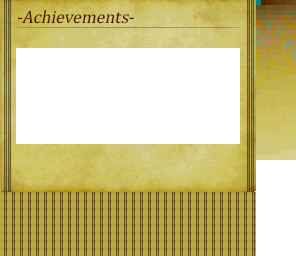
<style>
.page{position:relative;width:296px;height:256px;background:#ffffff}
.page>*{position:absolute;margin:0}
.t1{font:18px "Cambria";color:#502000;font-style:italic}
</style>
<div class="page">
<p class="t1" style="left:17px;top:10px;width:117px;height:14px">-Achievements-</p>
</div>
